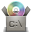
<style>
.page{position:relative;width:32px;height:32px;background:#ffffff}
.page>*{position:absolute;margin:0}
.t1{font:10.3px "CourierNewPS-BoldMT";letter-spacing:-0.125em}
.t2{font:10.3px "CourierNewPS-BoldMT";letter-spacing:-0.2em}
.t3{font:8px "CourierNewPS-BoldMT";letter-spacing:-0.1em}
</style>
<div class="page">
<p class="t1" style="left:9px;top:20px;width:13px;height:8px">C<span class="t2">:</span><span class="t3">\</span></p>
</div>
